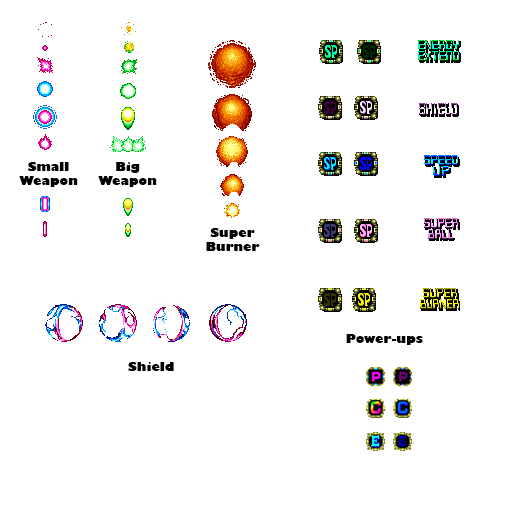
<style>
.page{position:relative;width:512px;height:512px;background:#ffffff}
.page>*{position:absolute;margin:0}
.t1{font:12px "GillSans-UltraBold";color:#020100}
</style>
<div class="page">
<p class="t1" style="left:19px;top:162px;width:59px;height:25px;text-align:center">Small <br>Weapon</p>
<p class="t1" style="left:98px;top:162px;width:59px;height:25px;text-align:center">Big<br>Weapon</p>
<p class="t1" style="left:206px;top:228px;width:54px;height:23px;text-align:center">Super<br>Burner</p>
<p class="t1" style="left:346px;top:334px;width:77px;height:11px">Power-ups</p>
<p class="t1" style="left:128px;top:362px;width:46px;height:9px">Shield</p>
</div>
